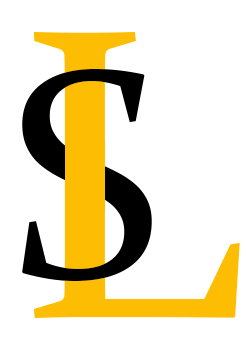
<style>
.page{position:relative;width:250px;height:350px;background:#ffffff}
.page>*{position:absolute;margin:0}
.t1{font:416.7px "Constantia";color:#fcbd03}
.t2{font:300px "Constantia";color:#000000}
</style>
<div class="page">
<p class="t1" style="left:33px;top:32px;width:207px;height:286px">L</p>
<p class="t2" style="left:22px;top:69px;width:130px;height:212px">S</p>
</div>
